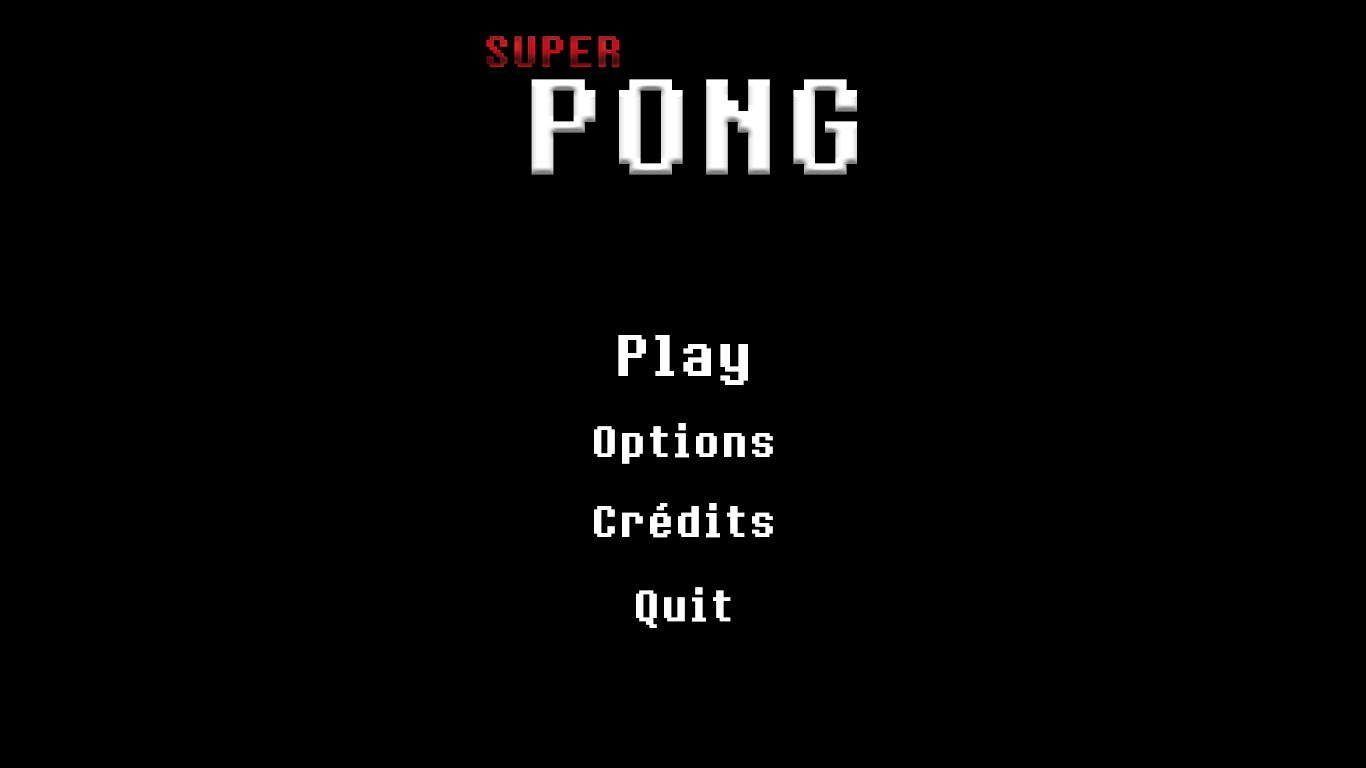
<style>
.page{position:relative;width:1366px;height:768px;background:#000000}
.page>*{position:absolute;margin:0}
.t1{font:36px "8bitoperatorRegular";font-weight:bold}
.t2{font:112.1px "8bitoperatorRegular";color:#ffffff;font-weight:bold}
.t3{font:48px "8bitoperatorRegular";color:#ffffff;font-weight:bold}
.t4{font:36px "8bitoperatorRegular";color:#ffffff;font-weight:bold}
</style>
<div class="page">
<p class="t1" style="left:486px;top:36px;width:134px;height:31px">SUPER</p>
<p class="t2" style="left:531px;top:79px;width:326px;height:96px">PONG</p>
<p class="t3" style="left:618px;top:335px;width:130px;height:50px">Play</p>
<p class="t4" style="left:594px;top:423px;width:179px;height:41px">Options</p>
<p class="t4" style="left:594px;top:503px;width:179px;height:35px">Crédits</p>
<p class="t4" style="left:636px;top:587px;width:95px;height:41px">Quit</p>
</div>
